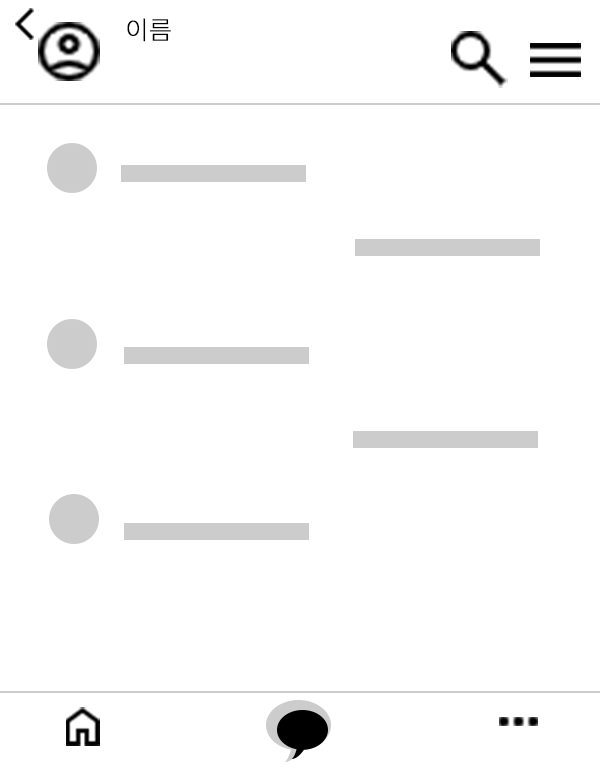
<style>
.page{position:relative;width:600px;height:768px;background:#ffffff}
.page>*{position:absolute;margin:0}
.t1{font:25px "NotoSansKR-Thin";color:#000000;font-weight:bold}
</style>
<div class="page">
<p class="t1" style="left:127px;top:18px;width:44px;height:24px">이름</p>
</div>
